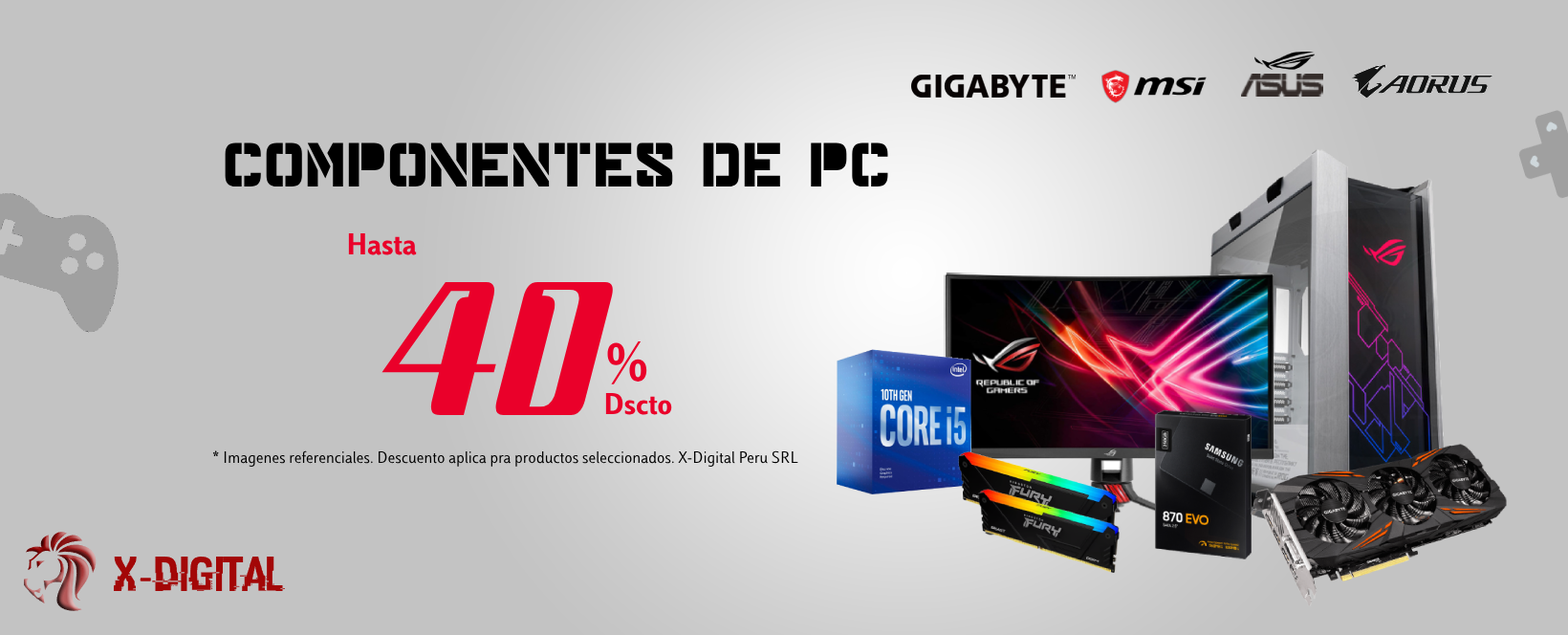
<style>
.page{position:relative;width:1568px;height:635px;background:#c3c3c3}
.page>*{position:absolute;margin:0}
.t1{font:69.6px "MajorSnafu";color:#000000;scale:0.93 1}
.t2{font:31.6px "LuissSans-Bold";color:#ea002a}
.t3{font:340.4px "Magenta";color:#ea002a;scale:0.72 1}
.t4{font:57px "LuissSans-Bold";color:#ea002a;scale:0.95 1}
.t5{font:17.2px "LuissSans-Regular";color:#000000}
</style>
<div class="page">
<p class="t1" style="left:225px;top:142px;width:663px;height:44px">Componentes de PC</p>
<p class="t2" style="left:348px;top:232px;width:69px;height:23px">Hasta</p>
<p class="t3" style="left:381px;top:282px;width:232px;height:133px">40</p>
<p class="t4" style="left:607px;top:341px;width:40px;height:43px">%</p>
<p class="t2" style="left:605px;top:392px;width:67px;height:23px">Dscto</p>
<p class="t5" style="left:212px;top:450px;width:586px;height:18px">* Imagenes referenciales. Descuento aplica pra productos seleccionados. X-Digital Peru SRL</p>
</div>
